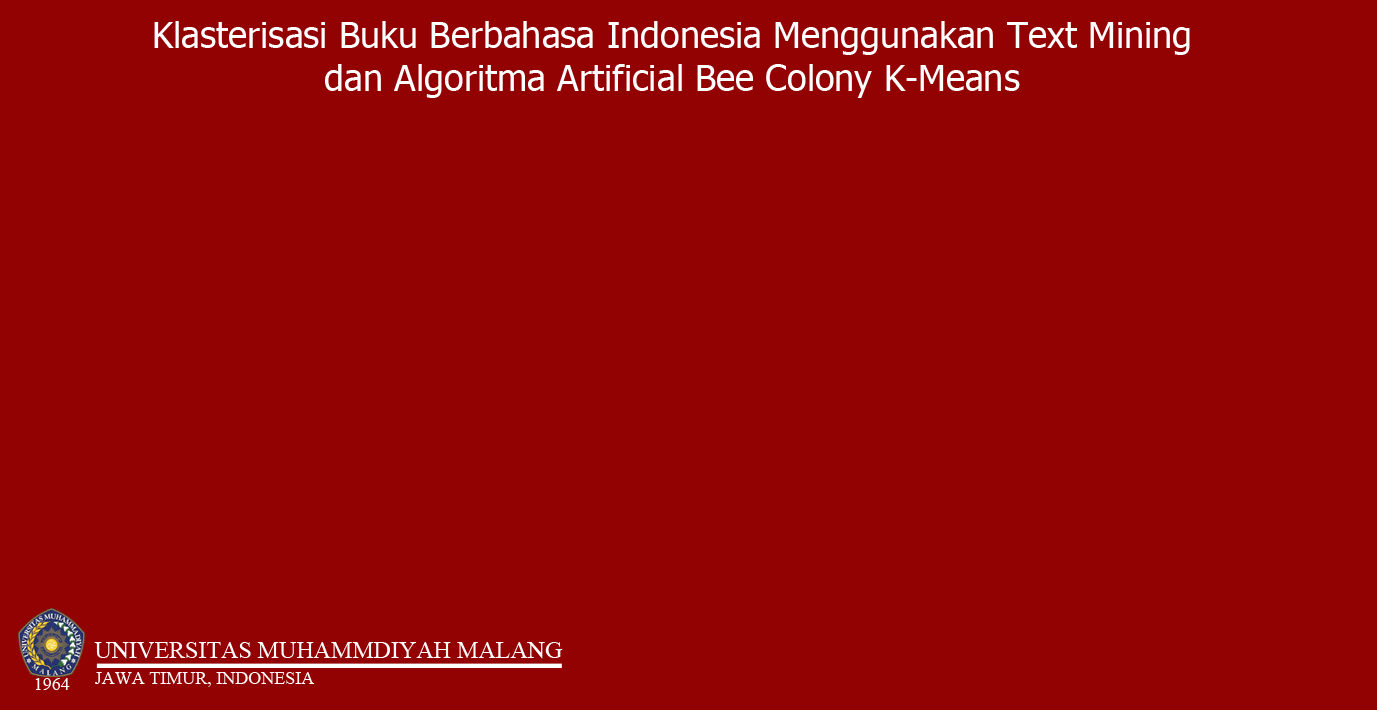
<style>
.page{position:relative;width:1377px;height:710px;background:#930202}
.page>*{position:absolute;margin:0}
.t1{font:36px "Tahoma";color:#ffffff}
.t2{font:24px "TimesNewRomanPSMT";color:#ffffff}
.t3{font:18px "TimesNewRomanPSMT";color:#ffffff}
</style>
<div class="page">
<p class="t1" style="left:154px;top:21px;width:1036px;height:77px;text-align:center">Klasterisasi Buku Berbahasa Indonesia Menggunakan Text Mining<br>dan Algoritma Artificial Bee Colony K-Means</p>
<p class="t2" style="left:94px;top:642px;width:469px;height:17px">UNIVERSITAS MUHAMMDIYAH MALANG</p>
<p class="t3" style="left:35px;top:678px;width:35px;height:12px">1964</p>
<p class="t3" style="left:95px;top:672px;width:220px;height:15px">JAWA TIMUR, INDONESIA</p>
</div>
